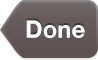
<style>
.page{position:relative;width:98px;height:60px}
.page>*{position:absolute;margin:0}
.t1{font:23.9px "HelveticaNeue-Bold";color:#ffffff}
</style>
<div class="page">
<p class="t1" style="left:26px;top:20px;width:59px;height:18px">Done</p>
</div>
